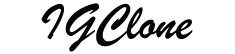
<style>
.page{position:relative;width:235px;height:54px;background:#ffffff}
.page>*{position:absolute;margin:0}
.t1{font:52.6px "BrushScriptMT";color:#040404}
</style>
<div class="page">
<p class="t1" style="left:41px;top:3px;width:152px;height:49px">IGClone</p>
</div>
